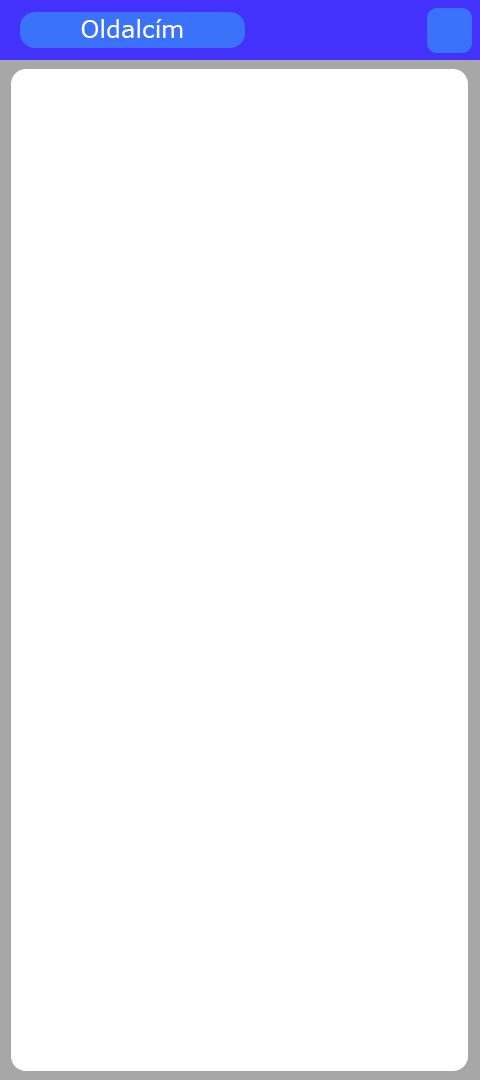
<style>
.page{position:relative;width:480px;height:1080px;background:#ffffff}
.page>*{position:absolute;margin:0}
.t1{font:24px "Verdana";color:#fefefe}
</style>
<div class="page">
<p class="t1" style="left:81px;top:19px;width:102px;height:19px">Oldalcím</p>
</div>
